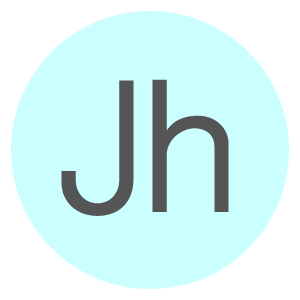
<style>
.page{position:relative;width:300px;height:300px;background:#cbffff}
.page>*{position:absolute;margin:0}
.t1{font:190px "GujaratiSangamMN";color:#555555}
</style>
<div class="page">
<p class="t1" style="left:61px;top:79px;width:168px;height:137px">Jh</p>
</div>
